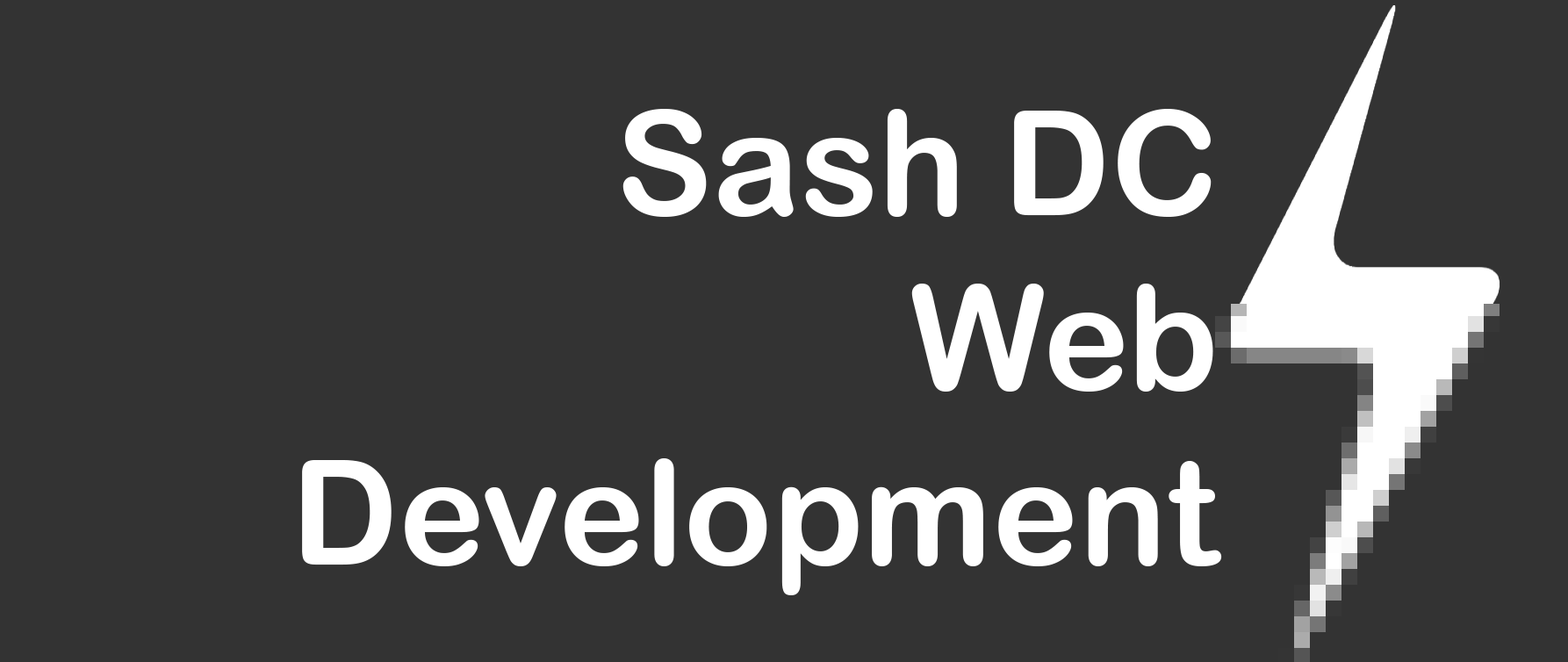
<style>
.page{position:relative;width:1568px;height:662px;background:#333333}
.page>*{position:absolute;margin:0}
.t1{font:145.7px "ArialRoundedMTBold";color:#ffffff}
</style>
<div class="page">
<p class="t1" style="left:302px;top:109px;width:920px;height:486px;text-align:right">Sash DC  <br>Web <br>Development</p>
</div>
